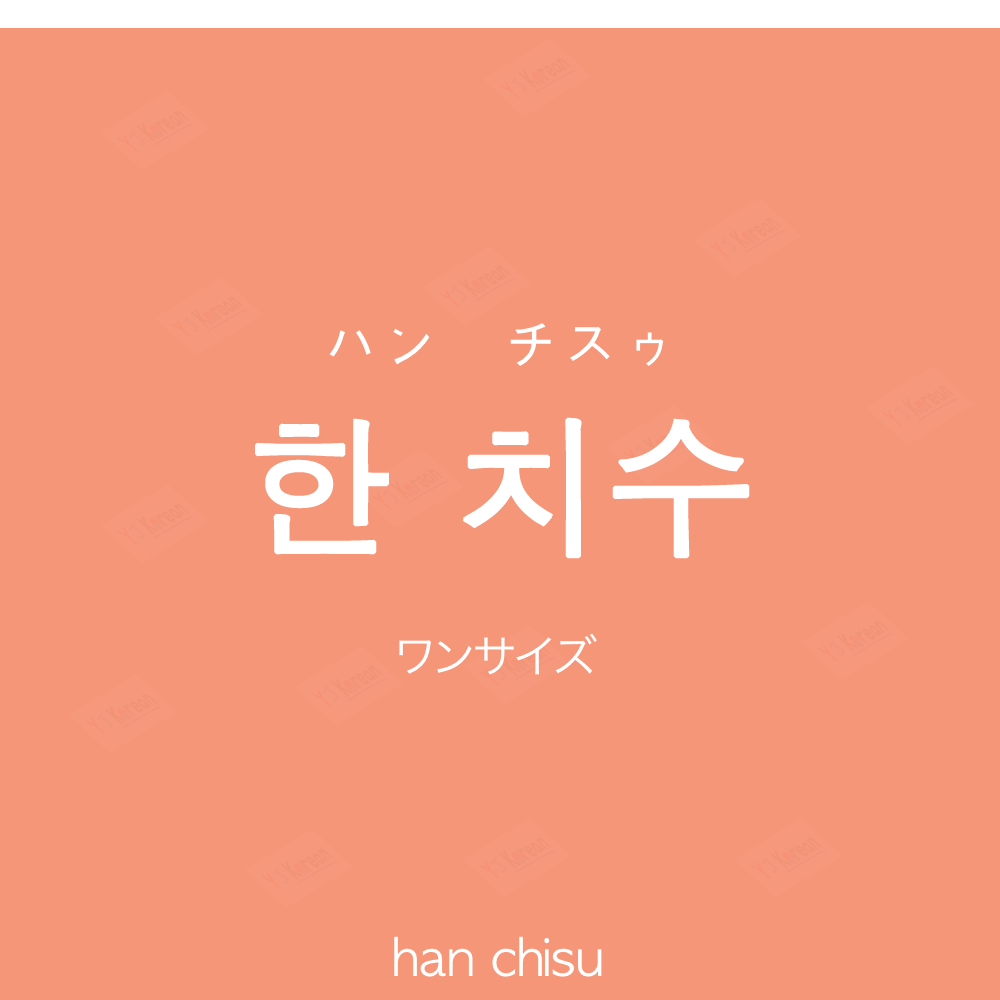
<style>
.page{position:relative;width:1000px;height:1000px;background:#f69679}
.page>*{position:absolute;margin:0}
.t1{font:60px "AppleGothic";color:#ffffff}
.t2{font:150px "AppleGothic";color:#ffffff;font-weight:bold}
.t3{font:45px "HiraKakuProN-W3";color:#ffffff}
.t4{font:50px "AppleGothic";color:#ffffff}
</style>
<div class="page">
<p class="t1" style="left:329px;top:323px;width:335px;height:43px">ハン　チスゥ</p>
<p class="t2" style="left:255px;top:417px;width:495px;height:142px">한 치수</p>
<p class="t3" style="left:399px;top:633px;width:198px;height:42px">ワンサイズ</p>
<p class="t4" style="left:394px;top:936px;width:208px;height:41px">han chisu</p>
</div>
